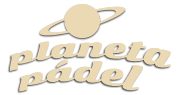
<style>
.page{position:relative;width:180px;height:95px;background:#ffffff}
.page>*{position:absolute;margin:0}
.t1{font:27.5px "SonsieOne-Regular";letter-spacing:0.01em;color:#ebd9b3}
</style>
<div class="page">
<p class="t1" style="left:9px;top:41px;width:162px;height:30px">planeta</p>
<p class="t1" style="left:19px;top:59px;width:124px;height:33px">pádel</p>
</div>
